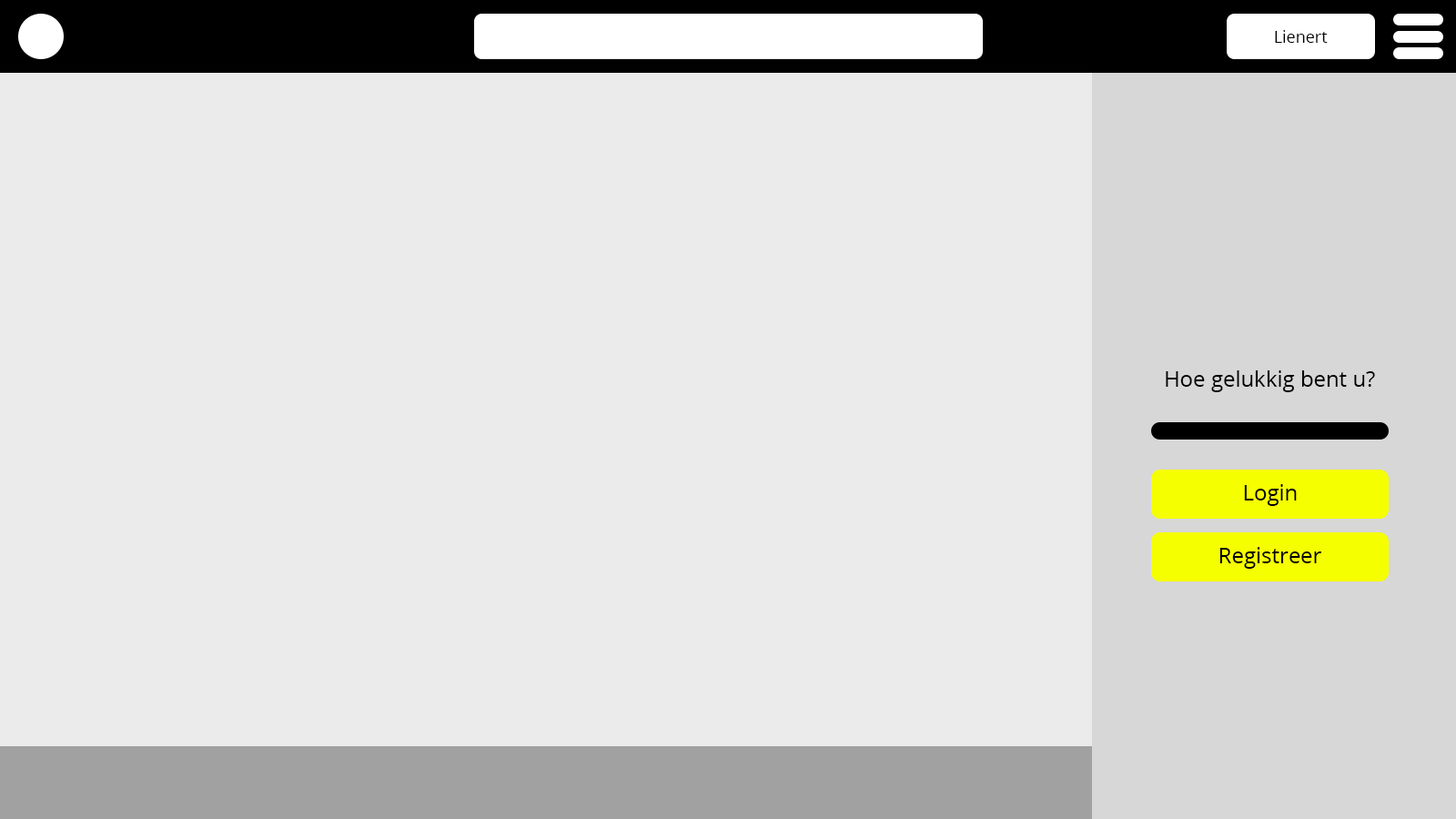
<style>
.page{position:relative;width:1456px;height:819px;background:#ebebeb}
.page>*{position:absolute;margin:0}
.t1{font:16.4px "OpenSans";color:#000000}
.t2{font:21.8px "OpenSans";color:#000000}
</style>
<div class="page">
<p class="t1" style="left:1275px;top:30px;width:53px;height:13px">Lienert</p>
<p class="t2" style="left:1166px;top:370px;width:209px;height:22px">Hoe gelukkig bent u?</p>
<p class="t2" style="left:1244px;top:484px;width:53px;height:22px">Login</p>
<p class="t2" style="left:1219px;top:547px;width:102px;height:22px">Registreer</p>
</div>
